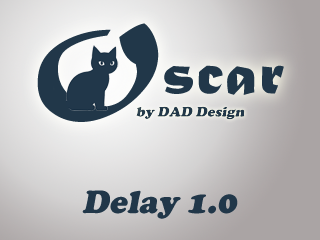
<style>
.page{position:relative;width:320px;height:240px}
.page>*{position:absolute;margin:0}
.t1{font:64.4px "MaturaMTScriptCapitals";letter-spacing:0.025em;color:#213749}
.t2{font:107.3px "MaturaMTScriptCapitals";letter-spacing:0.025em;color:#213749}
.t3{font:14.3px "CooperBlack";color:#213749;font-style:italic}
.t4{font:33.3px "CooperBlack";color:#213749;font-style:italic}
</style>
<div class="page">
<p class="t1" style="left:37px;top:23px;width:247px;height:99px"><span class="t2">O</span>scar</p>
<p class="t3" style="left:136px;top:106px;width:109px;height:14px">by DAD Design</p>
<p class="t4" style="left:82px;top:190px;width:156px;height:29px">Delay 1.0</p>
</div>
